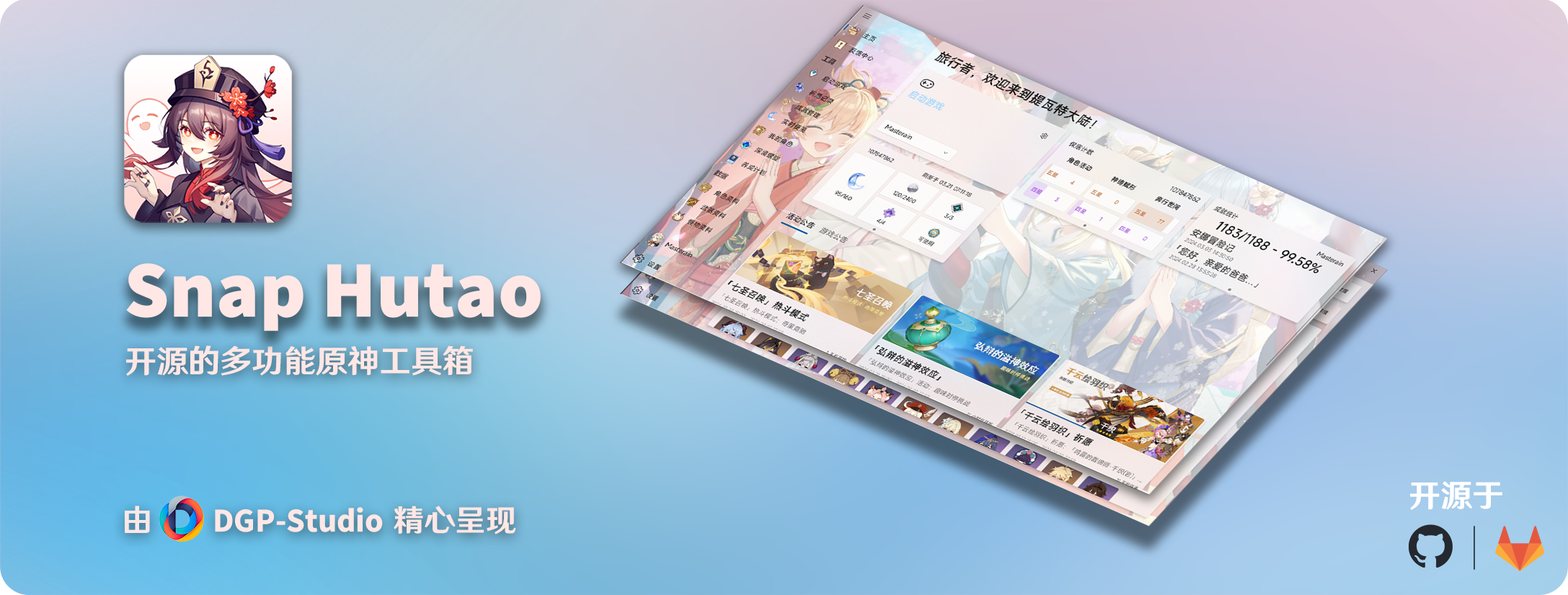
<style>
.page{position:relative;width:1568px;height:595px}
.page>*{position:absolute;margin:0}
.t1{font:80.3px "SourceSansRoman-Black";color:#ffe7e5}
.t2{font:34.6px "HYWenHei-85W";color:#ffe7e5}
.t3{font:34.6px "HYWenHei-85W";color:#ffffff}
.t4{font:33.5px "SourceSansRoman-Bold";color:#ffe7e5}
.t5{font:33.5px "HYWenHei-85W";color:#ffe7e5}
.t6{font:45px "AlimamaAgileVF-Thin"}
</style>
<div class="page">
<p class="t1" style="left:126px;top:263px;width:415px;height:68px">Snap Hutao</p>
<p class="t2" style="left:126px;top:345px;width:347px;height:31px">开源的多功能原神工具箱</p>
<p class="t3" style="left:1410px;top:481px;width:92px;height:29px">开源于</p>
<p class="t4" style="left:125px;top:505px;width:391px;height:29px"><span class="t5">由      </span>DGP-Studio<span class="t5"> 精心呈现</span></p>
<p class="t6" style="left:1474px;top:526px;width:1px;height:44px">|</p>
</div>
